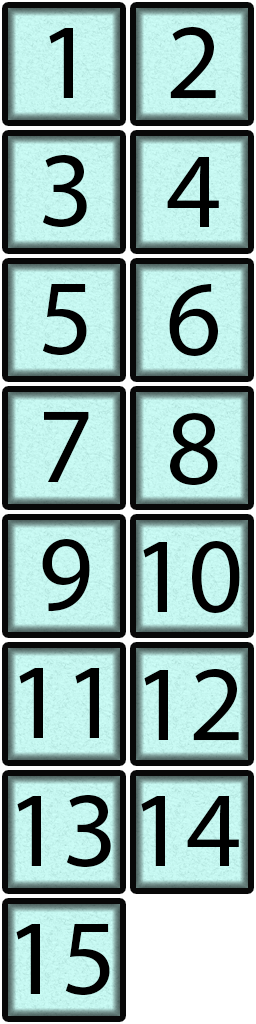
<style>
.page{position:relative;width:256px;height:1024px}
.page>*{position:absolute;margin:0}
.t1{font:108.4px "MyriadPro-Regular";color:#000000}
</style>
<div class="page">
<p class="t1" style="left:49px;top:28px;width:24px;height:70px">1</p>
<p class="t1" style="left:170px;top:26px;width:46px;height:73px">2</p>
<p class="t1" style="left:42px;top:155px;width:45px;height:72px">3</p>
<p class="t1" style="left:167px;top:157px;width:52px;height:70px">4</p>
<p class="t1" style="left:42px;top:284px;width:45px;height:71px">5</p>
<p class="t1" style="left:169px;top:284px;width:49px;height:72px">6</p>
<p class="t1" style="left:44px;top:411px;width:45px;height:71px">7</p>
<p class="t1" style="left:170px;top:413px;width:48px;height:72px">8</p>
<p class="t1" style="left:42px;top:539px;width:48px;height:73px">9</p>
<p class="t1" style="left:143px;top:541px;width:97px;height:72px">10</p>
<p class="t1" style="left:19px;top:668px;width:80px;height:70px">11</p>
<p class="t1" style="left:144px;top:668px;width:95px;height:73px">12</p>
<p class="t1" style="left:17px;top:795px;width:94px;height:72px">13</p>
<p class="t1" style="left:141px;top:796px;width:98px;height:70px">14</p>
<p class="t1" style="left:16px;top:924px;width:94px;height:71px">15</p>
</div>
